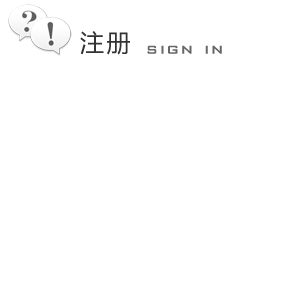
<style>
.page{position:relative;width:282px;height:283px;background:#ffffff}
.page>*{position:absolute;margin:0}
.t1{font:24px "MicrosoftYaHei";letter-spacing:0.1em;color:#333333}
.t2{font:18px "BankGothicBT-Light";letter-spacing:0.1em;color:#666666;font-weight:bold}
</style>
<div class="page">
<p class="t1" style="left:80px;top:31px;width:50px;height:24px">注册</p>
<p class="t2" style="left:147px;top:45px;width:75px;height:9px">sign in</p>
</div>
